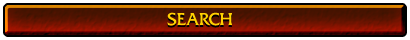
<style>
.page{position:relative;width:410px;height:40px}
.page>*{position:absolute;margin:0}
.t1{font:18px "FrizQuadrataStd";color:#ffd100}
</style>
<div class="page">
<p class="t1" style="left:167px;top:12px;width:65px;height:14px">SEARCH</p>
</div>
